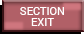
<style>
.page{position:relative;width:84px;height:34px;background:#b16067}
.page>*{position:absolute;margin:0}
.t1{font:11px/11px "Roboto-Regular";color:#ffffff}
</style>
<div class="page">
<p class="t1" style="left:20px;top:7px;width:44px;height:19px;text-align:center">SECTION<br>EXIT</p>
<p class="t1" style="left:20px;top:7px;width:44px;height:19px;text-align:center">SECTION<br>EXIT</p>
</div>
